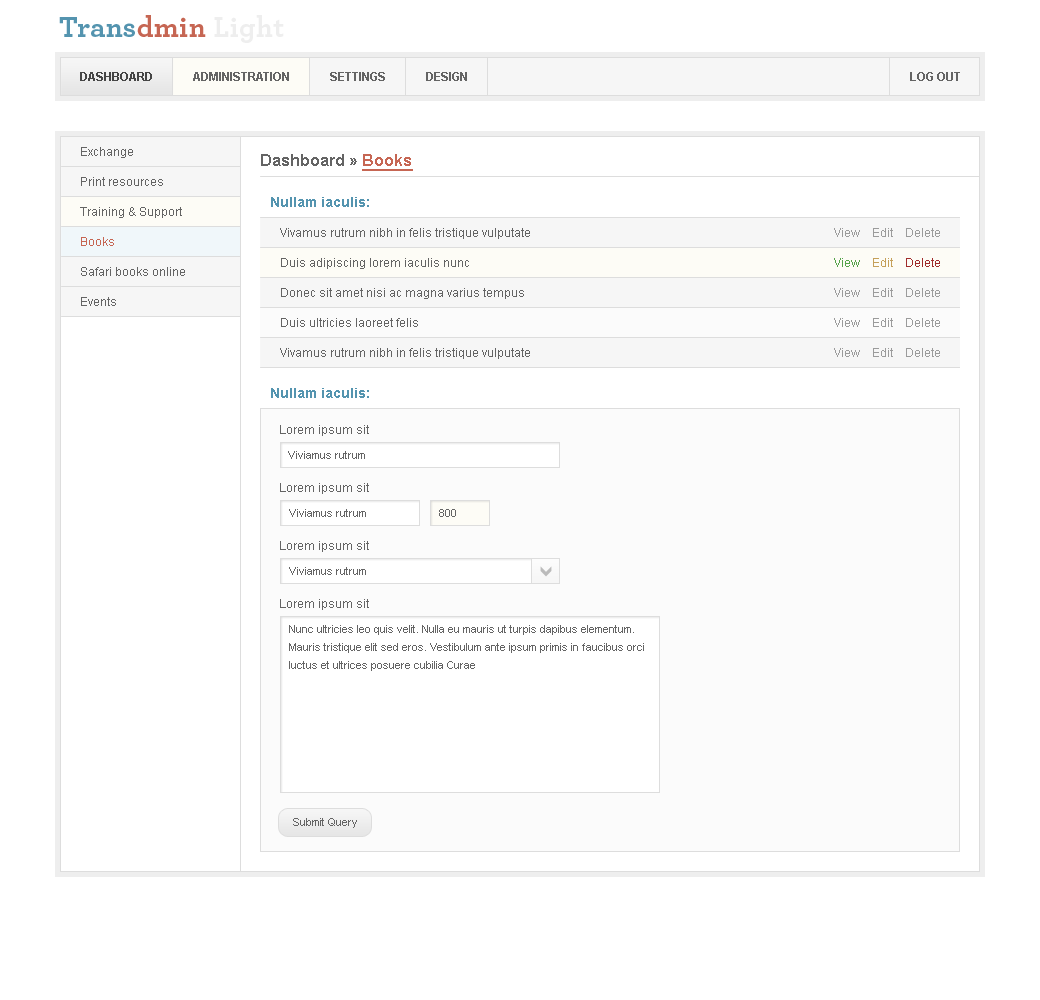
<style>
.page{position:relative;width:1040px;height:1000px;background:#ffffff}
.page>*{position:absolute;margin:0}
.t1{font:30px "Archer-Bold";letter-spacing:0.01em;color:#5494af}
.t2{font:30px "Archer-Bold";letter-spacing:0.01em;color:#c66653}
.t3{font:30px "Archer-Bold";letter-spacing:0.01em;color:#eeeeee}
.t4{font:12px "Arial-BoldMT";color:#454545}
.t5{font:12px "Arial-BoldMT";color:#646464}
.t6{font:12px/30px "ArialMT";color:#646464}
.t7{font:12px/30px "ArialMT";color:#c66653}
.t8{font:16px "Arial-BoldMT";color:#646464}
.t9{font:16px "Arial-BoldMT";color:#c66653;text-decoration:underline}
.t10{font:14px "Arial-BoldMT";color:#5494af}
.t11{font:14px/30px "Arial-BoldMT";color:#5494af}
.t12{font:12px/30px "ArialMT";color:#9b9b9b}
.t13{font:14px/30px "Arial-BoldMT";color:#9b9b9b}
.t14{font:12px/30px "ArialMT";color:#55a34a}
.t15{font:12px/30px "ArialMT";color:#c5a059}
.t16{font:12px/30px "ArialMT";color:#a02b2b}
.t17{font:12px "ArialMT";color:#646464}
.t18{font:11px "ArialMT";color:#646464}
.t19{font:11px/18px "ArialMT";color:#646464}
</style>
<div class="page">
<p class="t1" style="left:59px;top:15px;width:225px;height:28px">Trans<span class="t2">dmin </span><span class="t3">Light</span></p>
<p class="t4" style="left:80px;top:72px;width:72px;height:9px">DASHBOARD</p>
<p class="t5" style="left:193px;top:72px;width:96px;height:9px">ADMINISTRATION</p>
<p class="t5" style="left:330px;top:72px;width:55px;height:9px">SETTINGS</p>
<p class="t5" style="left:426px;top:72px;width:41px;height:9px">DESIGN</p>
<p class="t5" style="left:910px;top:72px;width:50px;height:9px">LOG OUT</p>
<p class="t6" style="left:80px;top:147px;width:105px;height:159px">Exchange<br>Print resources<br>Training &amp; Support<br><span class="t7">Books<br></span>Safari books online<br>Events</p>
<p class="t8" style="left:261px;top:154px;width:152px;height:17px">Dashboard » <span class="t9">Books</span></p>
<p class="t10" style="left:271px;top:197px;width:98px;height:10px">Nullam iaculis:</p>
<p class="t6" style="left:280px;top:228px;width:250px;height:131px"><span class="t11"><br></span>Vivamus rutrum nibh in felis tristique vulputate<br>Duis adipiscing lorem iaculis nunc<br>Donec sit amet nisi ac magna varius tempus<br>Duis ultricies laoreet felis<br>Vivamus rutrum nibh in felis tristique vulputate</p>
<p class="t12" style="left:834px;top:228px;width:106px;height:129px;text-align:right"><span class="t13"><br></span>View    Edit    Delete<br><span class="t14">View    </span><span class="t15">Edit    </span><span class="t16">Delete<br></span>View    Edit    Delete<br>View    Edit    Delete<br>View    Edit    Delete</p>
<p class="t10" style="left:271px;top:388px;width:98px;height:10px">Nullam iaculis:</p>
<p class="t17" style="left:280px;top:483px;width:89px;height:11px">Lorem ipsum sit</p>
<p class="t18" style="left:289px;top:509px;width:77px;height:8px">Viviamus rutrum</p>
<p class="t18" style="left:439px;top:509px;width:17px;height:8px">800</p>
<p class="t17" style="left:280px;top:541px;width:89px;height:11px">Lorem ipsum sit</p>
<p class="t18" style="left:289px;top:567px;width:77px;height:8px">Viviamus rutrum</p>
<p class="t17" style="left:280px;top:599px;width:89px;height:11px">Lorem ipsum sit</p>
<p class="t19" style="left:289px;top:625px;width:355px;height:46px">Nunc ultricies leo quis velit. Nulla eu mauris ut turpis dapibus elementum. <br>Mauris tristique elit sed eros. Vestibulum ante ipsum primis in faucibus orci <br>luctus et ultrices posuere cubilia Curae</p>
<p class="t18" style="left:293px;top:818px;width:64px;height:10px">Submit Query</p>
</div>
